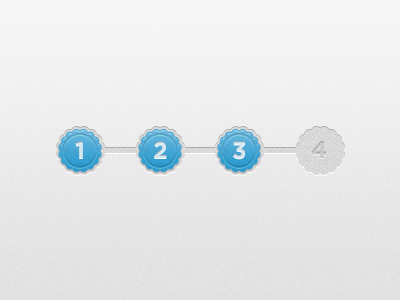
<style>
.page{position:relative;width:400px;height:300px}
.page>*{position:absolute;margin:0}
.t1{font:23.8px "Gotham-Bold";letter-spacing:0.05em;color:#d1e5f1}
.t2{font:23.8px "Gotham-Bold";letter-spacing:0.05em;color:#d3e7f3}
.t3{font:23.8px "Gotham-Bold";letter-spacing:0.05em;color:#d1e6f2}
.t4{font:23.8px "Gotham-Bold";letter-spacing:0.05em;color:#d5e8f4}
.t5{font:23.8px "Gotham-Bold";letter-spacing:0.05em;color:#d2e6f2}
.t6{font:23.8px "Gotham-Bold";letter-spacing:0.05em;color:#c9c9ca}
</style>
<div class="page">
<p class="t1" style="left:74px;top:141px;width:8px;height:17px">1</p>
<p class="t2" style="left:75px;top:141px;width:8px;height:17px">1</p>
<p class="t3" style="left:154px;top:141px;width:13px;height:17px">2</p>
<p class="t3" style="left:154px;top:141px;width:13px;height:17px">2</p>
<p class="t4" style="left:233px;top:142px;width:13px;height:18px">3</p>
<p class="t5" style="left:233px;top:141px;width:13px;height:18px">3</p>
<p class="t6" style="left:311px;top:141px;width:15px;height:17px">4</p>
</div>
